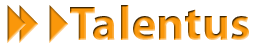
<style>
.page{position:relative;width:256px;height:48px;background:#ffffff}
.page>*{position:absolute;margin:0}
.t1{font:48px "MyriadPro-Bold"}
</style>
<div class="page">
<p class="t1" style="left:70px;top:5px;width:179px;height:35px">Talentus</p>
</div>
